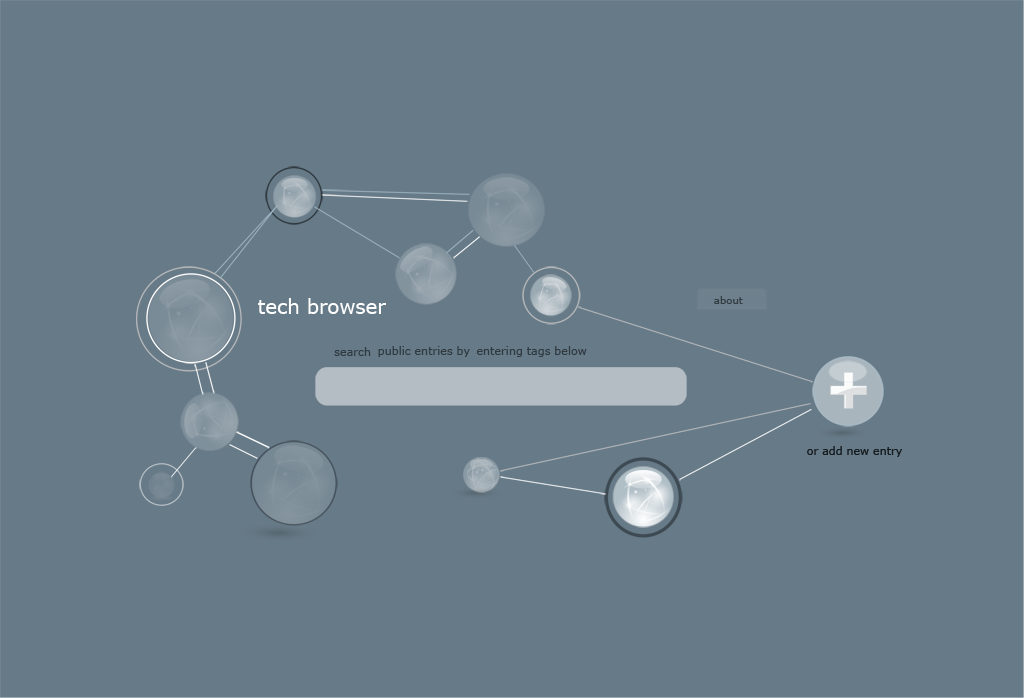
<style>
.page{position:relative;width:1024px;height:698px;background:#677a87}
.page>*{position:absolute;margin:0}
.t1{font:19.7px "Verdana";color:#ffffff}
.t2{font:10.1px "Verdana";color:#323c43}
.t3{font:11.4px "Verdana";color:#2f3940}
.t4{font:11.1px "Verdana";color:#161b1e}
</style>
<div class="page">
<p class="t1" style="left:258px;top:298px;width:128px;height:16px">tech browser</p>
<p class="t2" style="left:714px;top:296px;width:29px;height:8px">about</p>
<p class="t3" style="left:334px;top:347px;width:37px;height:9px">search</p>
<p class="t3" style="left:378px;top:346px;width:92px;height:11px">public entries by</p>
<p class="t3" style="left:477px;top:346px;width:110px;height:11px">entering tags below</p>
<p class="t4" style="left:807px;top:446px;width:95px;height:11px">or add new entry</p>
<p class="t4" style="left:807px;top:446px;width:95px;height:11px">or add new entry</p>
</div>
